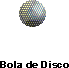
<style>
.page{position:relative;width:69px;height:68px;background:#ffffff}
.page>*{position:absolute;margin:0}
.t1{font:10.3px "Arial-BoldMT";color:#000000;scale:1.11 1}
</style>
<div class="page">
<p class="t1" style="left:0px;top:61px;width:69px;height:7px">Bola de Disco</p>
</div>
